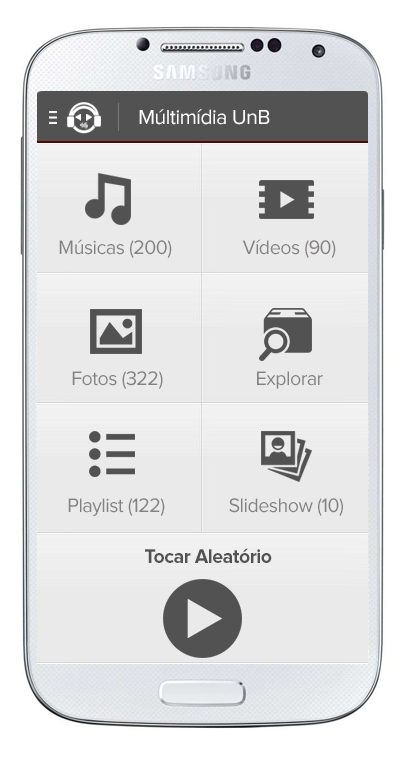
<style>
.page{position:relative;width:407px;height:770px;background:#eaeaea}
.page>*{position:absolute;margin:0}
.t1{font:21.1px "ProximaNova-Regular";letter-spacing:-0.025em;color:#ffffff}
.t2{font:20.1px "ProximaNova-Regular";letter-spacing:-0.025em;color:#858181}
.t3{font:20.1px "ProximaNova-Bold";letter-spacing:-0.025em;color:#525252}
</style>
<div class="page">
<p class="t1" style="left:139px;top:109px;width:131px;height:16px">Múltimídia UnB</p>
<p class="t2" style="left:59px;top:239px;width:113px;height:19px">Músicas (200)</p>
<p class="t2" style="left:242px;top:239px;width:94px;height:19px">Vídeos (90)</p>
<p class="t2" style="left:72px;top:371px;width:91px;height:18px">Fotos (322)</p>
<p class="t2" style="left:257px;top:371px;width:66px;height:18px">Explorar</p>
<p class="t2" style="left:68px;top:498px;width:97px;height:18px">Playlist (122)</p>
<p class="t2" style="left:229px;top:498px;width:114px;height:18px">Slideshow (10)</p>
<p class="t3" style="left:145px;top:548px;width:127px;height:15px">Tocar Aleatório</p>
</div>
